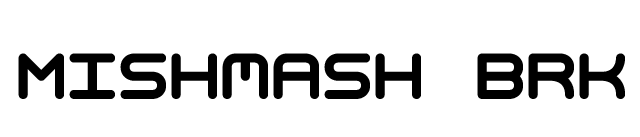
<style>
.page{position:relative;width:640px;height:137px;background:#ffffff}
.page>*{position:absolute;margin:0}
.t1{font:65px "MishmashBRK";color:#000000}
</style>
<div class="page">
<p class="t1" style="left:18px;top:53px;width:607px;height:46px">Mishmash BRK</p>
</div>
